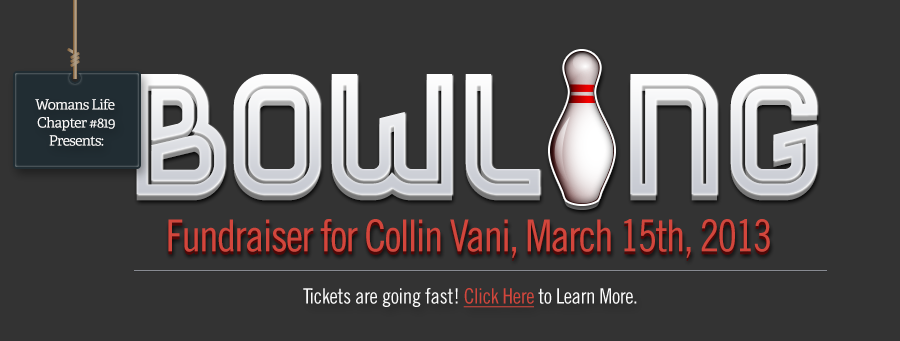
<style>
.page{position:relative;width:900px;height:341px;background:#333333}
.page>*{position:absolute;margin:0}
.t1{font:200px "Bender-Inline";letter-spacing:-0.02em}
.t2{font:14px/18px "Adelle-Regular";letter-spacing:-0.04em;color:#fbfbfb}
.t3{font:44px "TradeGothic-CondEighteen";letter-spacing:-0.04em}
.t4{font:44px "TradeGothic-CondEighteen";letter-spacing:-0.04em;color:#d2463c}
.t5{font:21.2px "TradeGothic-CondEighteen";letter-spacing:-0.02em;color:#fbfbfb}
.t6{font:21.2px "TradeGothic-CondEighteen";letter-spacing:-0.02em;color:#d2463c;text-decoration:underline}
</style>
<div class="page">
<p class="t1" style="left:136px;top:74px;width:681px;height:121px">bowl  ng</p>
<p class="t1" style="left:136px;top:80px;width:681px;height:121px">bowl  ng</p>
<p class="t2" style="left:35px;top:99px;width:80px;height:47px;text-align:center">Womans Life <br>Chapter #819<br>Presents:</p>
<p class="t3" style="left:168px;top:222px;width:602px;height:39px">Fundraiser for Collin Vani, March 15th, 2013</p>
<p class="t4" style="left:168px;top:219px;width:602px;height:39px">Fundraiser for Collin Vani, March 15th, 2013</p>
<p class="t5" style="left:303px;top:288px;width:334px;height:20px">Tickets are going fast! <span class="t6">Click Here </span>to Learn More.</p>
</div>
